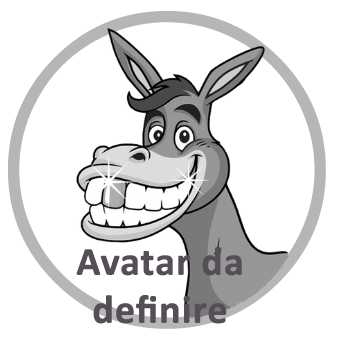
<style>
.page{position:relative;width:339px;height:339px;background:#ffffff}
.page>*{position:absolute;margin:0}
.t1{font:40px "Calibri-Bold";color:#554e56;font-weight:bold}
</style>
<div class="page">
<p class="t1" style="left:76px;top:247px;width:166px;height:77px;text-align:center">Avatar da definire</p>
</div>
